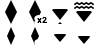
<style>
.page{position:relative;width:96px;height:48px;background:#ffffff}
.page>*{position:absolute;margin:0}
.t1{font:8px "SFUIDisplay-Heavy";letter-spacing:0.04em;color:#000000}
</style>
<div class="page">
<p class="t1" style="left:37px;top:17px;width:10px;height:6px">x2</p>
</div>
